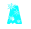
<style>
.page{position:relative;width:31px;height:29px;background:#ffffff}
.page>*{position:absolute;margin:0}
.t1{font:30px "winterflakes";color:#0ffcff}
</style>
<div class="page">
<p class="t1" style="left:7px;top:3px;width:15px;height:21px">A</p>
</div>
